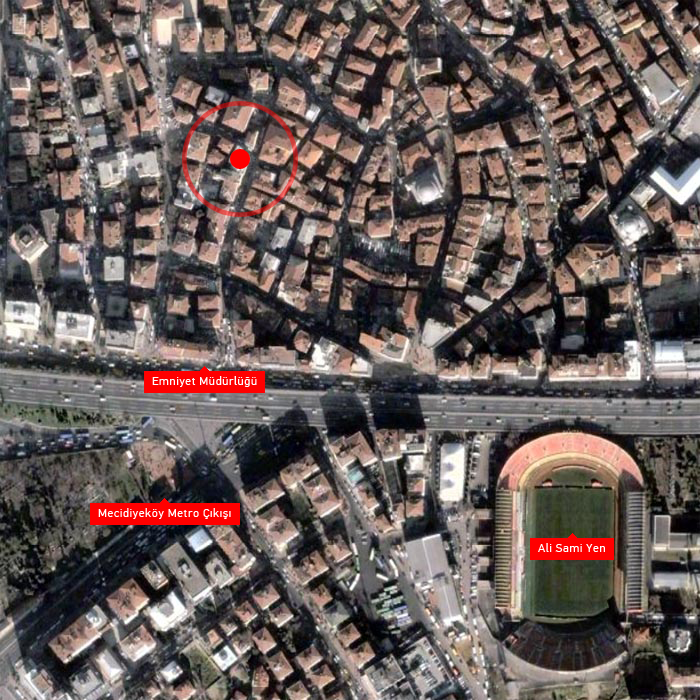
<style>
.page{position:relative;width:700px;height:700px}
.page>*{position:absolute;margin:0}
.t1{font:12px "PFDinTextPro-Regular";letter-spacing:0.05em;color:#ffffff}
</style>
<div class="page">
<p class="t1" style="left:152px;top:376px;width:105px;height:11px">Emniyet Müdürlüğü</p>
<p class="t1" style="left:98px;top:508px;width:133px;height:11px">Mecidiyeköy Metro Çıkışı</p>
<p class="t1" style="left:538px;top:543px;width:67px;height:9px">Ali Sami Yen</p>
</div>
